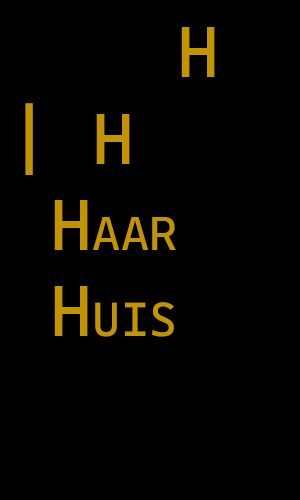
<style>
.page{position:relative;width:300px;height:500px;background:#000000}
.page>*{position:absolute;margin:0}
.t1{font:72px "CascadiaMono-Regular";color:#c19400}
.t2{font:48px "CascadiaMono-Regular";color:#c19400}
</style>
<div class="page">
<p class="t1" style="left:25px;top:27px;width:190px;height:310px">H | H<br> H<span class="t2">AAR<br></span> H<span class="t2">UIS</span></p>
</div>
